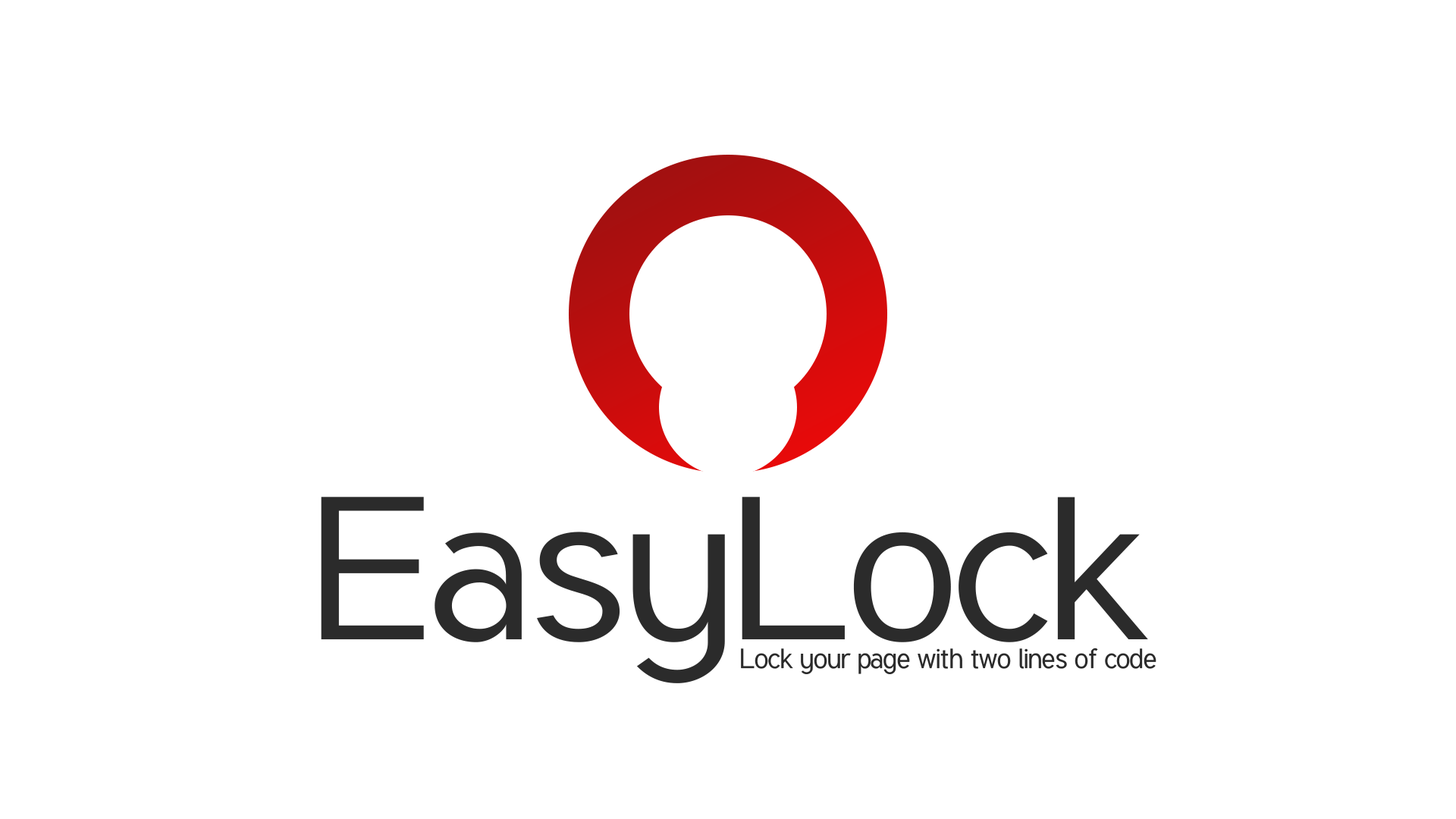
<style>
.page{position:relative;width:1456px;height:819px;background:#ffffff}
.page>*{position:absolute;margin:0}
.t1{font:200.2px "Tuffy";letter-spacing:-0.04em;color:#2b2b2b;scale:1.14 1}
.t2{font:27.4px "Tuffy";letter-spacing:-0.04em;color:#2b2b2b;scale:1.05 1}
</style>
<div class="page">
<p class="t1" style="left:321px;top:497px;width:827px;height:186px">EasyLock</p>
<p class="t2" style="left:741px;top:648px;width:415px;height:26px">Lock your page with two lines of code</p>
</div>
